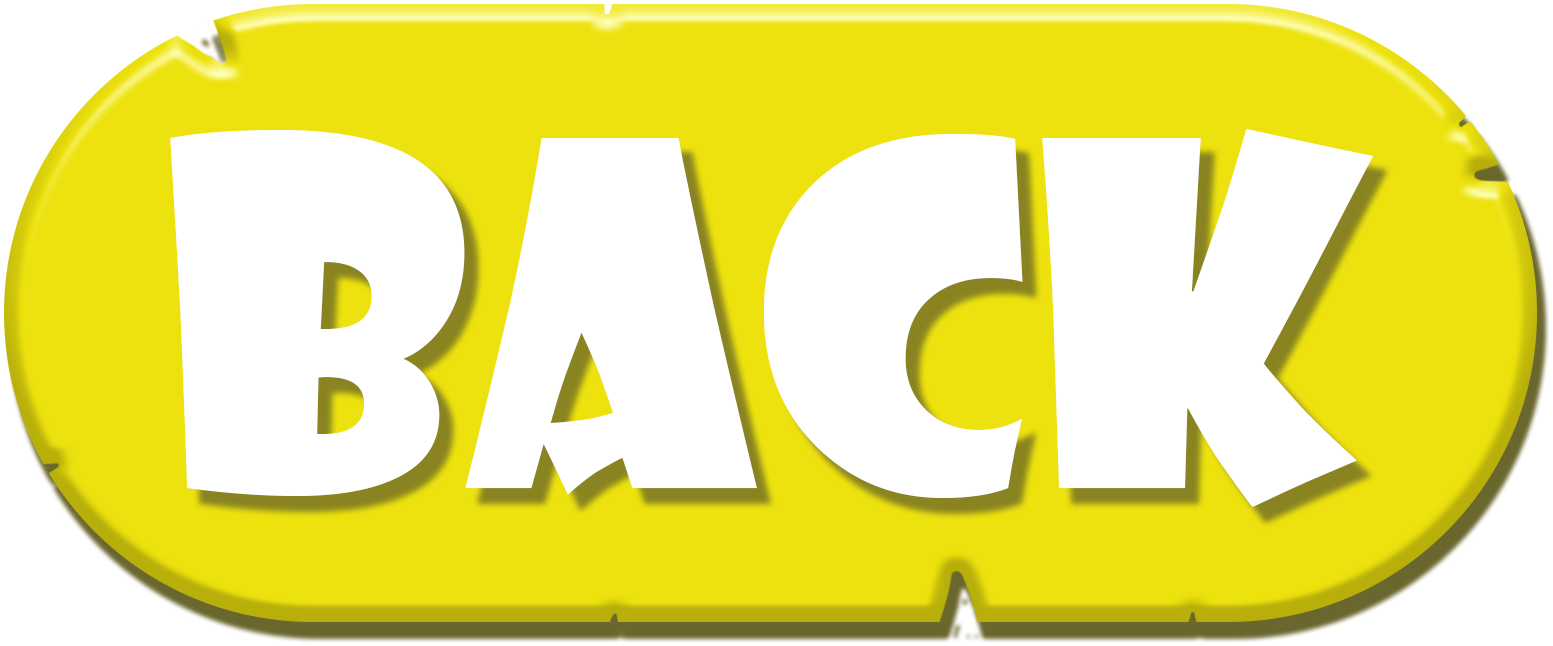
<style>
.page{position:relative;width:1553px;height:646px;background:#ede20e}
.page>*{position:absolute;margin:0}
.t1{font:465.7px "ShowcardGothic-Reg";color:#ffffff}
</style>
<div class="page">
<p class="t1" style="left:170px;top:129px;width:1204px;height:378px">BACK</p>
</div>
